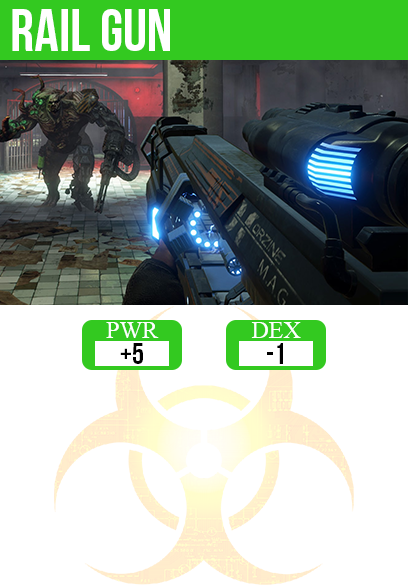
<style>
.page{position:relative;width:408px;height:585px;background:#ffffff}
.page>*{position:absolute;margin:0}
.t1{font:60px "BebasNeue";color:#ffffff}
.t2{font:24px "TimesNewRomanPSMT";color:#ffffff}
.t3{font:30px "BebasNeue";color:#000000}
</style>
<div class="page">
<p class="t1" style="left:12px;top:9px;width:158px;height:42px">rail gun</p>
<p class="t2" style="left:106px;top:322px;width:53px;height:16px">PWR</p>
<p class="t2" style="left:251px;top:322px;width:50px;height:16px">DEX</p>
<p class="t3" style="left:120px;top:343px;width:23px;height:21px">+5</p>
<p class="t3" style="left:267px;top:343px;width:16px;height:21px">-1</p>
</div>
